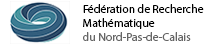
<style>
.page{position:relative;width:219px;height:45px;background:#ffffff}
.page>*{position:absolute;margin:0}
.t1{font:11.7px "MyriadPro-Regular";color:#000000}
.t2{font:11.7px "MyriadPro-Regular";color:#666666}
</style>
<div class="page">
<p class="t1" style="left:83px;top:4px;width:121px;height:37px">Fédération de Recherche<br>Mathématique<br><span class="t2">du Nord-Pas-de-Calais</span></p>
</div>
